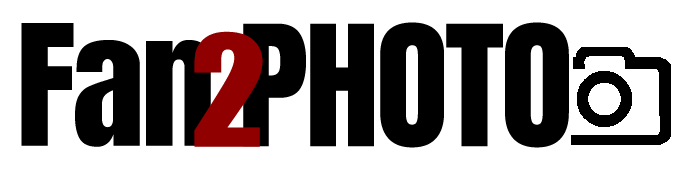
<style>
.page{position:relative;width:692px;height:169px;background:#ffffff}
.page>*{position:absolute;margin:0}
.t1{font:142.5px "Anton-Regular";letter-spacing:-0.025em;color:#000000;scale:1.05 1}
.t2{font:142.5px "Impact";letter-spacing:-0.025em;color:#900000;scale:1.05 1}
</style>
<div class="page">
<p class="t1" style="left:21px;top:23px;width:190px;height:124px">Fan</p>
<p class="t1" style="left:243px;top:22px;width:326px;height:126px">PHOTO</p>
<p class="t2" style="left:194px;top:31px;width:69px;height:116px">2</p>
</div>
